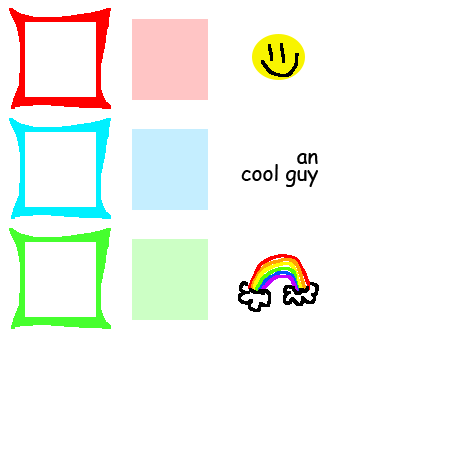
<style>
.page{position:relative;width:450px;height:450px;background:#ffffff}
.page>*{position:absolute;margin:0}
.t1{font:20.9px/16.7px "ComicSansMS";color:#000000}
</style>
<div class="page">
<p class="t1" style="left:241px;top:153px;width:77px;height:34px;text-align:right">an<br>cool guy</p>
</div>
